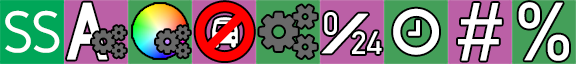
<style>
.page{position:relative;width:576px;height:64px}
.page>*{position:absolute;margin:0}
.t1{font:84px "HighwayGothic";color:#ffffff;font-weight:bold;scale:0.84 1}
.t2{font:85.7px "Gidole-Regular";letter-spacing:-0.64em;color:#ffffff;font-weight:bold}
.t3{font:61.9px "Gidole-Regular";letter-spacing:-0.02em;color:#ffffff}
.t4{font:32.1px "Gidole-Regular";color:#ffffff;font-weight:bold}
.t5{font:32.1px "Gidole-Regular";letter-spacing:-0.64em;color:#ffffff;font-weight:bold}
.t6{font:44px "Gidole-Regular";letter-spacing:-0.16em;color:#ffffff;font-weight:bold;scale:3.44 1}
</style>
<div class="page">
<p class="t1" style="left:67px;top:2px;width:41px;height:58px">A</p>
<p class="t2" style="left:458px;top:3px;width:44px;height:58px">#</p>
<p class="t2" style="left:518px;top:2px;width:51px;height:59px">%</p>
<p class="t3" style="left:5px;top:10px;width:55px;height:43px">SS</p>
<p class="t4" style="left:321px;top:12px;width:61px;height:42px"><span class="t5">0</span><span class="t6">/</span>24</p>
</div>
